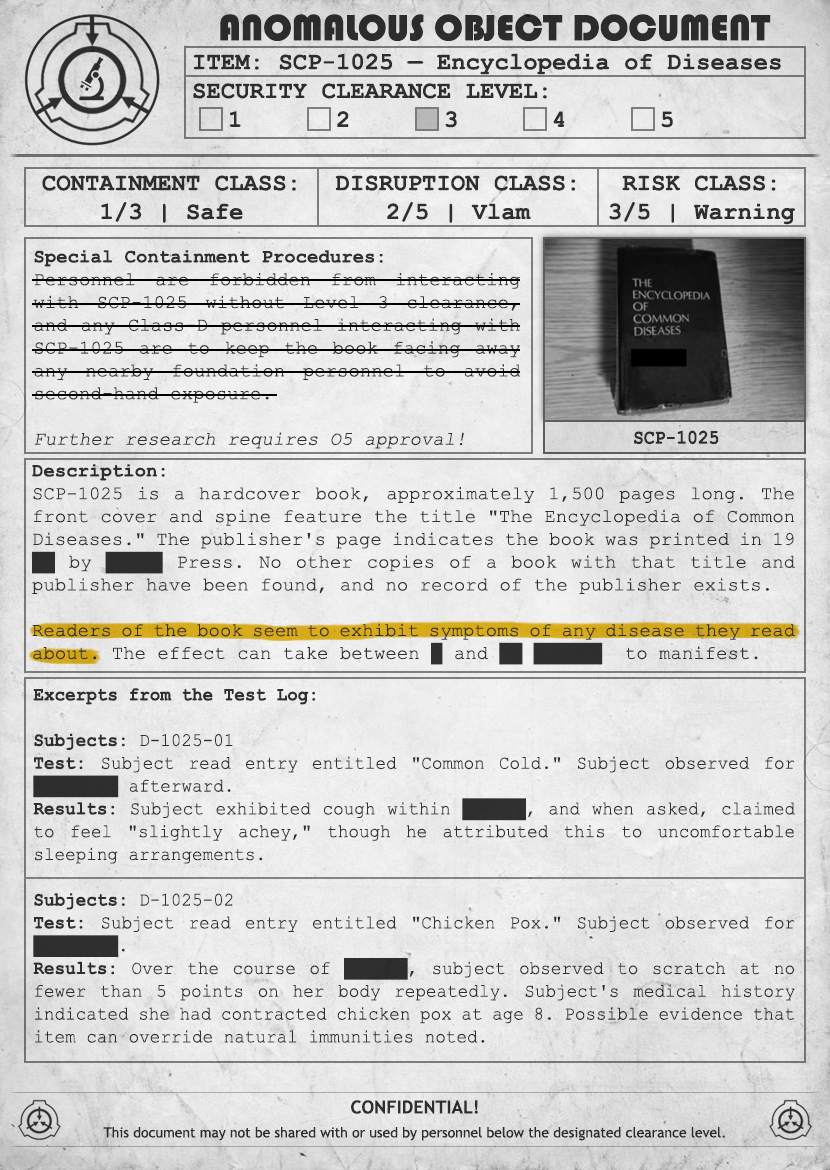
<style>
.page{position:relative;width:830px;height:1170px}
.page>*{position:absolute;margin:0}
.t1{font:38px "Bauhaus93";color:#333333;text-transform:uppercase}
.t2{font:24px "CourierNewPS-BoldMT";color:#333333}
.t3{font:24px "CourierNewPS-BoldMT";color:#333333;text-transform:uppercase}
.t4{font:19px "CourierNewPSMT";color:#333333}
.t5{font:19px "CourierNewPS-BoldMT";color:#333333}
.t6{font:19px "CourierNewPSMT";color:#333333;font-style:italic}
.t7{font:20.1px "CourierNewPS-BoldMT";color:#333333;scale:0.9 1}
.t8{font:19px "CourierNewPSMT";color:#333333;scale:0.93 1}
.t9{font:19px "CourierNewPS-BoldMT";color:#333333;scale:0.93 1}
.t10{font:14px/24px "TrebuchetMS";color:#333333}
.t11{font:18px/24px "TrebuchetMS-Bold";color:#333333}
</style>
<div class="page">
<p class="t1" style="left:220px;top:14px;width:551px;height:27px">anomalous object document</p>
<p class="t2" style="left:193px;top:53px;width:588px;height:75px">ITEM: SCP-1025 — Encyclopedia of Diseases<br><span class="t3">Security CLEARANCE LEVEL:</span> <br> 1   2   3   4   5</p>
<p class="t2" style="left:42px;top:175px;width:254px;height:48px;text-align:center">CONTAINMENT CLASS:<br>1/3 | Safe</p>
<p class="t2" style="left:335px;top:175px;width:241px;height:48px;text-align:center">DISRUPTION CLASS:<br>2/5 | Vlam</p>
<p class="t2" style="left:609px;top:175px;width:186px;height:50px;text-align:center">RISK CLASS:<br>3/5 | Warning</p>
<p class="t4" style="left:33px;top:250px;width:488px;height:199px;text-align:justify"><span class="t5">Special Containment Procedures:<br></span>Personnel are forbidden from interacting with SCP-1025 without Level 3 clearance, and any Class-D personnel interacting with SCP-1025 are to keep the book facing away any nearby foundation personnel to avoid second-hand exposure.<br><br><span class="t6">Further research requires O5 approval!</span></p>
<p class="t7" style="left:634px;top:430px;width:85px;height:15px">SCP-1025</p>
<p class="t4" style="left:32px;top:464px;width:763px;height:201px;text-align:justify"><span class="t5">Description:<br></span>SCP-1025 is a hardcover book, approximately 1,500 pages long. The front cover and spine feature the title "The Encyclopedia of Common Diseases." The publisher's page indicates the book was printed in 19██ by █████ Press. No other copies of a book with that title and publisher have been found, and no record of the publisher exists.<br><br>Readers of the book seem to exhibit symptoms of any disease they read about. The effect can take between █ and ██ ██████  to manifest.</p>
<p class="t8" style="left:33px;top:688px;width:762px;height:355px;text-align:justify"><span class="t9">Excerpts from the Test Log:<br><br>Subjects:</span> D-1025-01<br><span class="t9">Test:</span> Subject read entry entitled "Common Cold." Subject observed for ████████ afterward.<br><span class="t9">Results:</span> Subject exhibited cough within ██████, and when asked, claimed to feel "slightly achey," though he attributed this to uncomfortable sleeping arrangements.<br><br><span class="t9">Subjects:</span> D-1025-02<br><span class="t9">Test:</span> Subject read entry entitled "Chicken Pox." Subject observed for ████████.<br><span class="t9">Results:</span> Over the course of ██████, subject observed to scratch at no fewer than 5 points on her body repeatedly. Subject's medical history indicated she had contracted chicken pox at age 8. Possible evidence that item can override natural immunities noted.</p>
<p class="t10" style="left:103px;top:1100px;width:622px;height:41px;text-align:center"><span class="t11">CONFIDENTIAL!<br></span>This document may not be shared with or used by personnel below the designated clearance level.</p>
</div>
